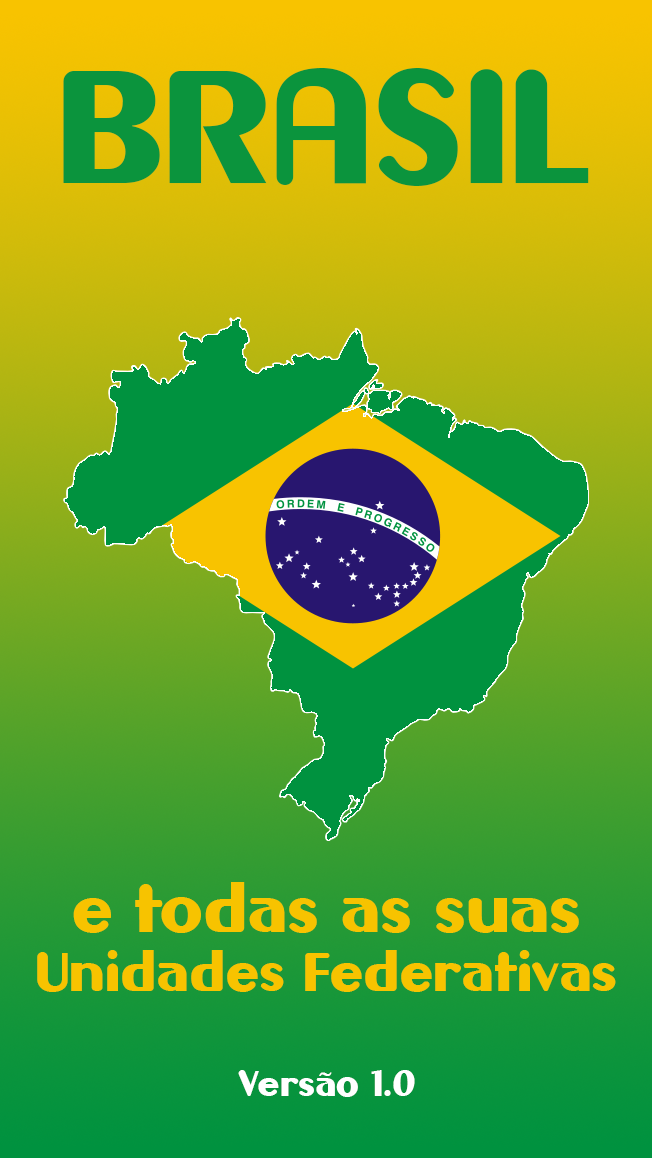
<style>
.page{position:relative;width:652px;height:1158px}
.page>*{position:absolute;margin:0}
.t1{font:144px "Gilgongo";color:#0b943d}
.t2{font:49px "Gilgongo";color:#f7c300}
.t3{font:60px "Gilgongo";color:#f7c300}
.t4{font:32px "Gilgongo";color:#ffffff}
</style>
<div class="page">
<p class="t1" style="left:63px;top:68px;width:526px;height:118px">BRASIL</p>
<p class="t2" style="left:37px;top:882px;width:579px;height:110px;text-align:center"><span class="t3">e todas as suas<br></span>Unidades Federativas</p>
<p class="t4" style="left:238px;top:1070px;width:177px;height:27px">Versão 1.0</p>
</div>
